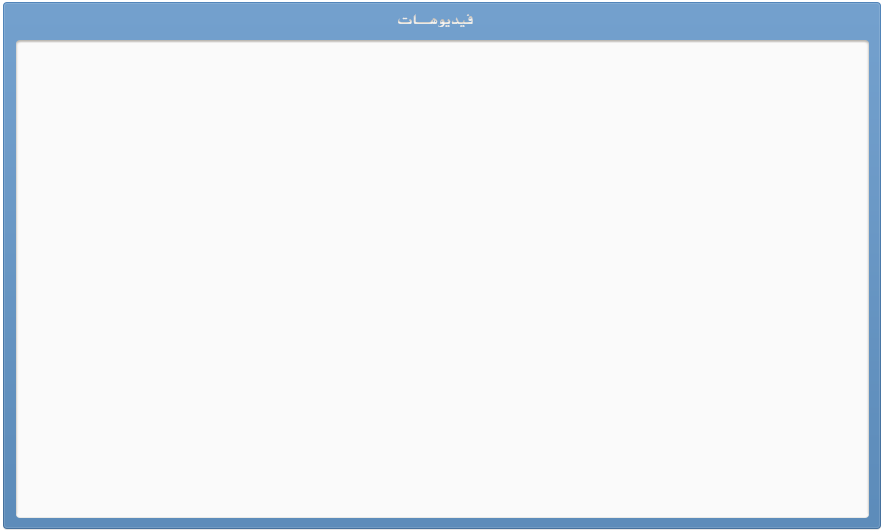
<style>
.page{position:relative;width:883px;height:530px;background:#fafafa}
.page>*{position:absolute;margin:0}
.t1{font:14.8px "BoutrosAdsMedium";color:#eaeae7;scale:1.08 1}
</style>
<div class="page">
<p class="t1" style="left:398px;top:14px;width:75px;height:13px">فيديوهـات</p>
</div>
